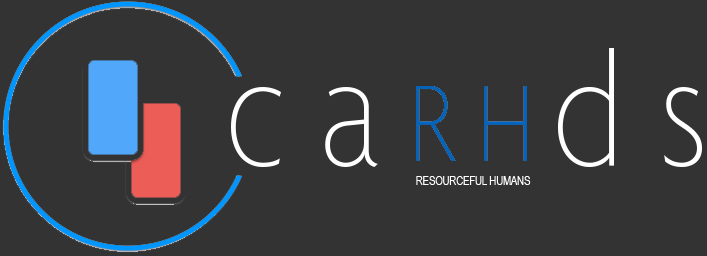
<style>
.page{position:relative;width:707px;height:256px;background:#333333}
.page>*{position:absolute;margin:0}
.t1{font:172px "Agenda-ThinCondensed";color:#ffffff}
.t2{font:11.5px "ArialNarrow";color:#ffffff}
</style>
<div class="page">
<p class="t1" style="left:231px;top:48px;width:471px;height:119px">c a     d s</p>
<p class="t2" style="left:416px;top:176px;width:115px;height:9px">RESOURCEFUL HUMANS</p>
</div>
